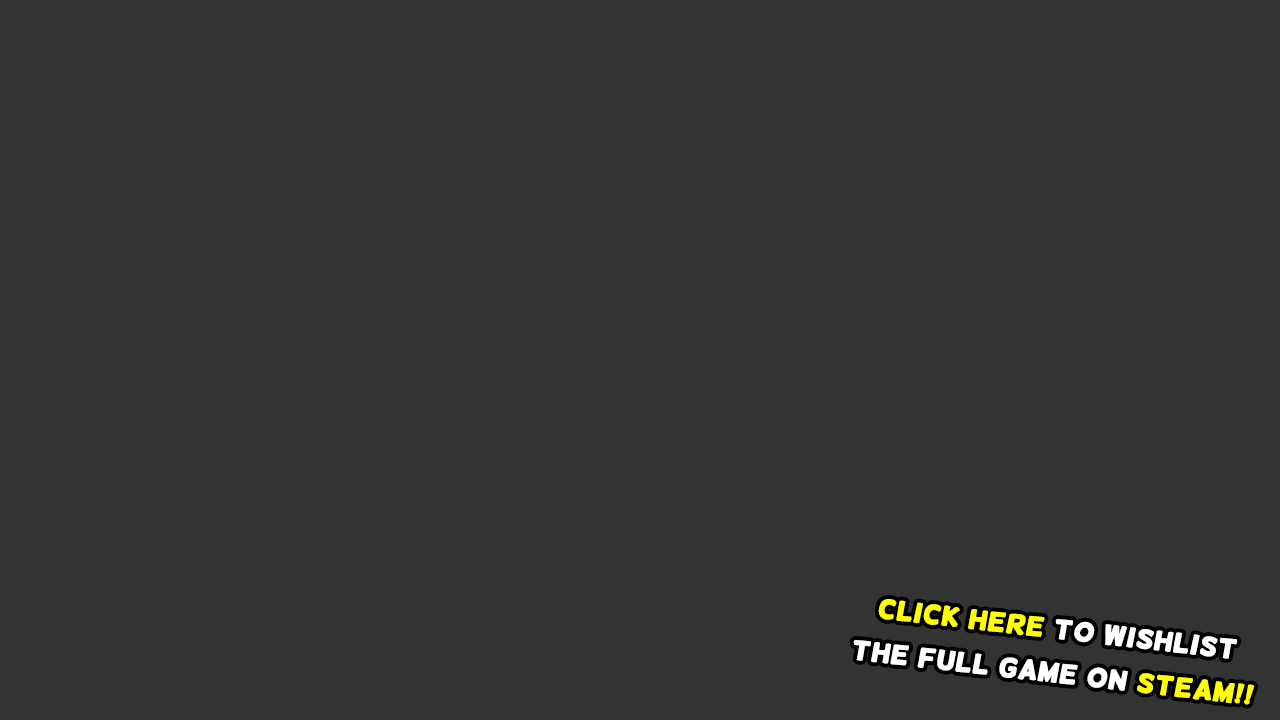
<style>
.page{position:relative;width:1280px;height:720px;background:#333333}
.page>*{position:absolute;margin:0}
.t1{font:26.3px/43.9px "Helsinki";color:#ffffff;font-variant:small-caps;font-weight:bold;scale:1.11 1}
.t2{font:26.3px/43.9px "Helsinki";color:#ffff00;font-variant:small-caps;font-weight:bold;scale:1.11 1}
.t3{font:26.3px/43.9px "Helsinki";color:#ffffff;font-weight:bold;scale:1.11 1}
</style>
<div class="page">
<p class="t1" style="left:853px;top:599px;width:402px;height:106px;text-align:center;rotate:7deg"><span class="t2">CLICK HERE</span> TO WISHLIST<br><span class="t3">THE FULL</span> GAME ON <span class="t2">STEAM!!</span></p>
</div>
